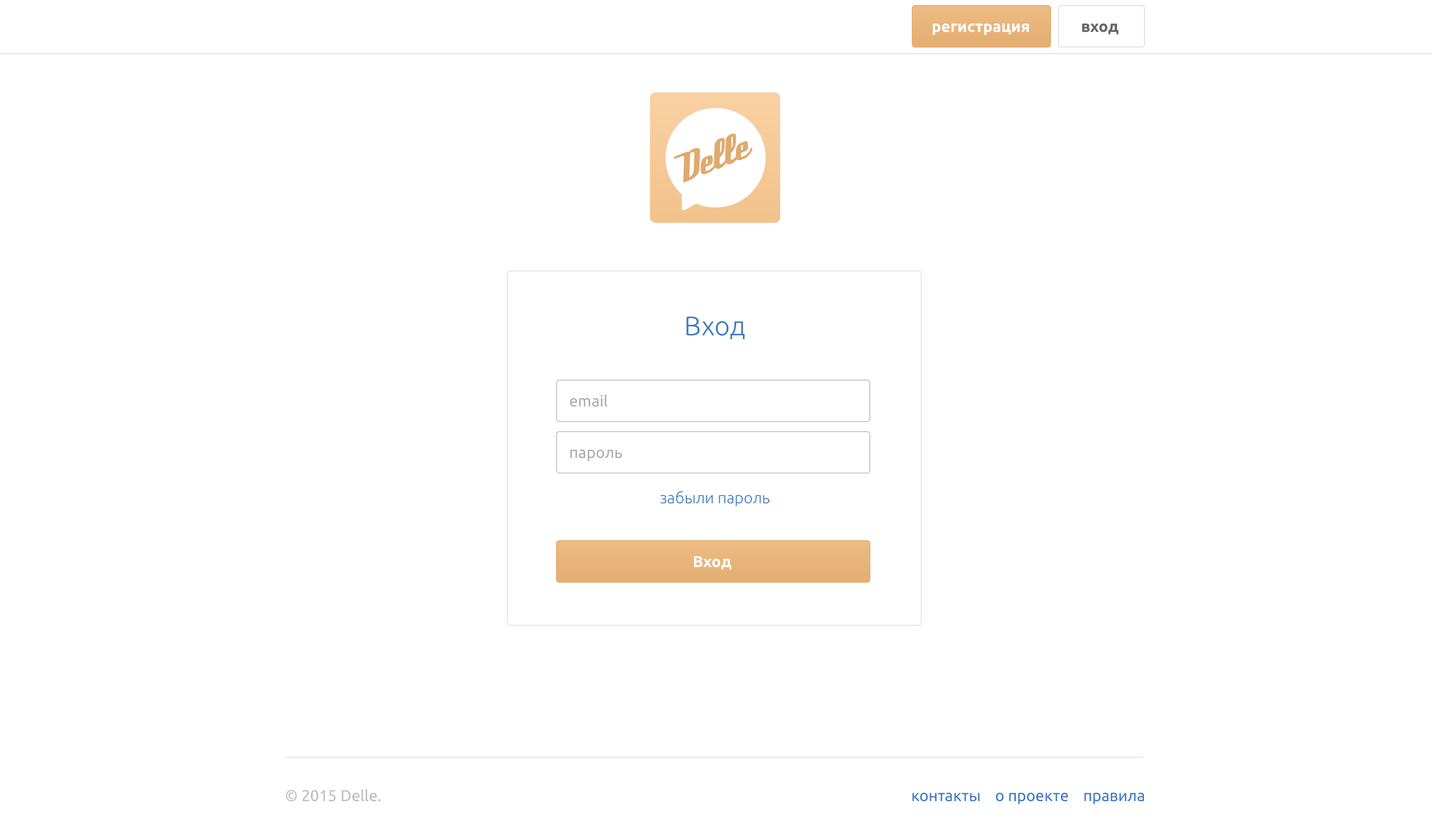
<style>
.page{position:relative;width:1432px;height:833px;background:#ffffff}
.page>*{position:absolute;margin:0}
.t1{font:15.7px "Ubuntu-Bold";color:#ffffff}
.t2{font:15.7px "Ubuntu-Bold";color:#666666}
.t3{font:42.5px "DeftoneStylus";color:#dfaa6d}
.t4{font:26.9px "Ubuntu-Light";color:#4078c0}
.t5{font:15.7px "Ubuntu";color:#acacac}
.t6{font:15.7px "Ubuntu-Light";color:#4078c0}
.t7{font:15.6px "Ubuntu";color:#bcbcbc}
.t8{font:15.6px "Ubuntu";color:#4078c0}
</style>
<div class="page">
<p class="t1" style="left:933px;top:23px;width:96px;height:12px">регистрация</p>
<p class="t2" style="left:1082px;top:23px;width:37px;height:12px">вход</p>
<p class="t3" style="left:674px;top:133px;width:79px;height:50px;rotate:-22deg">Delle</p>
<p class="t4" style="left:686px;top:316px;width:59px;height:23px">Вход</p>
<p class="t5" style="left:570px;top:394px;width:38px;height:13px">email</p>
<p class="t5" style="left:570px;top:449px;width:52px;height:12px">пароль</p>
<p class="t6" style="left:660px;top:491px;width:110px;height:15px">забыли пароль</p>
<p class="t1" style="left:694px;top:556px;width:38px;height:14px">Вход</p>
<p class="t7" style="left:286px;top:788px;width:95px;height:13px">© 2015 Delle.</p>
<p class="t8" style="left:913px;top:792px;width:231px;height:12px">контакты    о проекте    правила</p>
</div>
